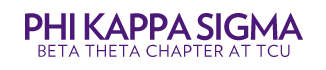
<style>
.page{position:relative;width:326px;height:70px;background:#ffffff}
.page>*{position:absolute;margin:0}
.t1{font:36.1px "Verlag-Bold";letter-spacing:-0.05em;color:#4d1979}
.t2{font:16.3px "Verlag-Book";letter-spacing:0.05em;color:#4d1979}
</style>
<div class="page">
<p class="t1" style="left:25px;top:13px;width:278px;height:28px">PHI KAPPA SIGMA</p>
<p class="t2" style="left:38px;top:44px;width:252px;height:13px">BETA THETA CHAPTER AT TCU</p>
</div>
